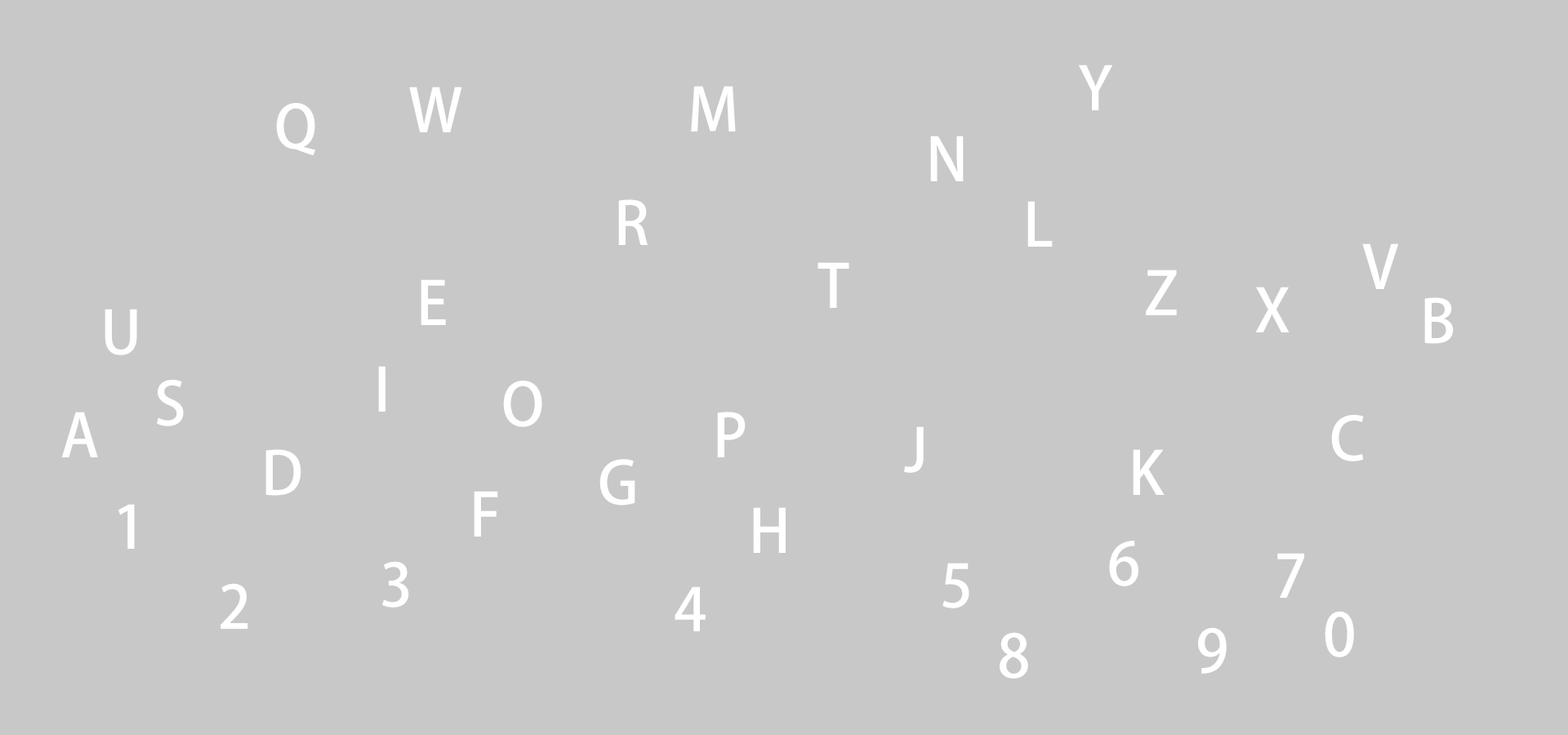
<style>
.page{position:relative;width:1568px;height:735px;background:#c8c8c8}
.page>*{position:absolute;margin:0}
.t1{font:58.8px "AdobeHeitiStd-Regular";color:#ffffff}
</style>
<div class="page">
<p class="t1" style="left:1078px;top:65px;width:35px;height:45px">Y</p>
<p class="t1" style="left:409px;top:87px;width:53px;height:45px">W</p>
<p class="t1" style="left:691px;top:86px;width:45px;height:45px">M</p>
<p class="t1" style="left:276px;top:103px;width:40px;height:53px">Q</p>
<p class="t1" style="left:930px;top:136px;width:34px;height:45px">N</p>
<p class="t1" style="left:618px;top:199px;width:30px;height:46px">R</p>
<p class="t1" style="left:1027px;top:201px;width:26px;height:46px">L</p>
<p class="t1" style="left:1362px;top:243px;width:37px;height:46px">V</p>
<p class="t1" style="left:817px;top:262px;width:32px;height:46px">T</p>
<p class="t1" style="left:1146px;top:270px;width:31px;height:45px">Z</p>
<p class="t1" style="left:421px;top:279px;width:25px;height:46px">E</p>
<p class="t1" style="left:1255px;top:287px;width:35px;height:45px">X</p>
<p class="t1" style="left:1424px;top:297px;width:30px;height:47px">B</p>
<p class="t1" style="left:105px;top:309px;width:32px;height:46px">U</p>
<p class="t1" style="left:378px;top:366px;width:7px;height:46px">I</p>
<p class="t1" style="left:157px;top:380px;width:27px;height:46px">S</p>
<p class="t1" style="left:503px;top:381px;width:39px;height:46px">O</p>
<p class="t1" style="left:61px;top:412px;width:37px;height:45px">A</p>
<p class="t1" style="left:717px;top:412px;width:29px;height:45px">P</p>
<p class="t1" style="left:1331px;top:415px;width:33px;height:46px">C</p>
<p class="t1" style="left:904px;top:426px;width:20px;height:47px">J</p>
<p class="t1" style="left:265px;top:449px;width:36px;height:47px">D</p>
<p class="t1" style="left:1133px;top:449px;width:32px;height:46px">K</p>
<p class="t1" style="left:599px;top:459px;width:36px;height:47px">G</p>
<p class="t1" style="left:474px;top:491px;width:24px;height:46px">F</p>
<p class="t1" style="left:118px;top:504px;width:17px;height:45px">1</p>
<p class="t1" style="left:753px;top:507px;width:33px;height:46px">H</p>
<p class="t1" style="left:1109px;top:541px;width:29px;height:45px">6</p>
<p class="t1" style="left:1277px;top:553px;width:27px;height:45px">7</p>
<p class="t1" style="left:382px;top:561px;width:27px;height:47px">3</p>
<p class="t1" style="left:942px;top:563px;width:27px;height:45px">5</p>
<p class="t1" style="left:220px;top:583px;width:28px;height:46px">2</p>
<p class="t1" style="left:675px;top:586px;width:31px;height:45px">4</p>
<p class="t1" style="left:1325px;top:611px;width:29px;height:46px">0</p>
<p class="t1" style="left:1198px;top:627px;width:29px;height:47px">9</p>
<p class="t1" style="left:1000px;top:632px;width:28px;height:47px">8</p>
</div>
